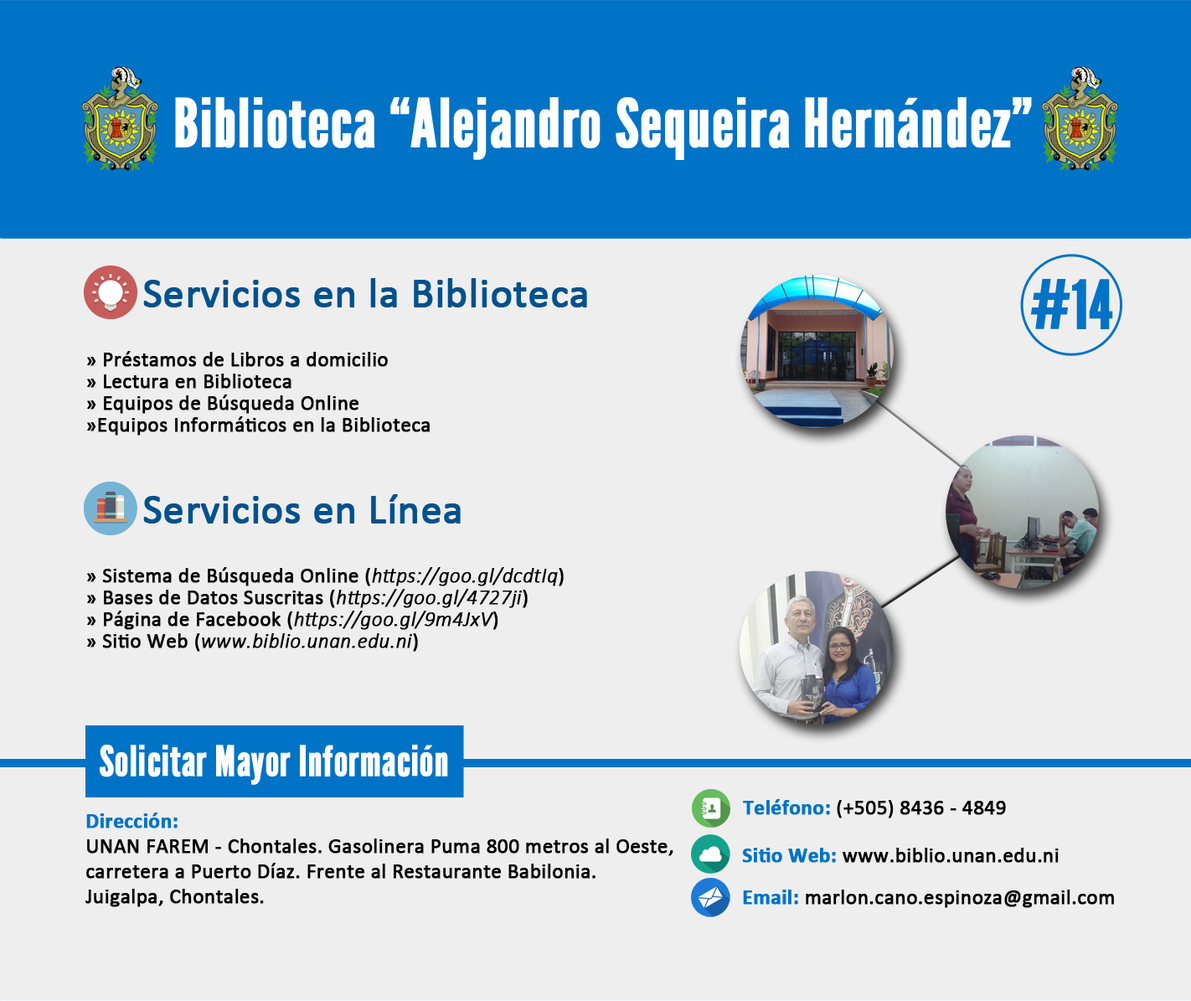
<style>
.page{position:relative;width:1191px;height:1001px;background:#eeeeee}
.page>*{position:absolute;margin:0}
.t1{font:67px "LeagueGothic-Regular";color:#ffffff;font-weight:bold}
.t2{font:41.9px "Calibri";color:#00518d;font-weight:bold}
.t3{font:67px "LeagueGothic-Regular";color:#0173c7;font-weight:bold}
.t4{font:20.9px "Calibri";color:#000000;font-weight:bold}
.t5{font:20.9px "Calibri-LightItalic";color:#000000;font-weight:bold}
.t6{font:41.9px "LeagueGothic-Regular";color:#ffffff;font-weight:bold}
.t7{font:20.9px "Calibri-Bold";color:#0173c7;font-weight:bold}
</style>
<div class="page">
<p class="t1" style="left:175px;top:97px;width:857px;height:63px">Biblioteca “Alejandro Sequeira Hernández”</p>
<p class="t2" style="left:143px;top:278px;width:444px;height:29px">Servicios en la Biblioteca</p>
<p class="t3" style="left:1031px;top:279px;width:82px;height:50px">#14</p>
<p class="t4" style="left:87px;top:351px;width:301px;height:16px">» Préstamos de Libros a domicilio</p>
<p class="t4" style="left:87px;top:374px;width:205px;height:15px">» Lectura en Biblioteca</p>
<p class="t4" style="left:87px;top:395px;width:272px;height:19px">» Equipos de Búsqueda Online</p>
<p class="t4" style="left:87px;top:416px;width:343px;height:20px">»Equipos Informáticos en la Biblioteca</p>
<p class="t2" style="left:143px;top:494px;width:318px;height:30px">Servicios en Línea</p>
<p class="t4" style="left:87px;top:567px;width:477px;height:19px">» Sistema de Búsqueda Online (<span class="t5">https://goo.gl/dcdtIq</span>)</p>
<p class="t4" style="left:87px;top:589px;width:441px;height:19px">» Bases de Datos Suscritas (<span class="t5">https://goo.gl/4727ji</span>)</p>
<p class="t4" style="left:87px;top:611px;width:411px;height:19px">» Página de Facebook (<span class="t5">https://goo.gl/9m4JxV</span>)</p>
<p class="t5" style="left:87px;top:633px;width:331px;height:19px"><span class="t4">» Sitio Web (</span>www.biblio.unan.edu.ni<span class="t4">)</span></p>
<p class="t6" style="left:100px;top:745px;width:348px;height:40px">Solicitar Mayor Información</p>
<p class="t4" style="left:743px;top:799px;width:263px;height:19px"><span class="t7">Teléfono: </span>(+505) 8436 - 4849</p>
<p class="t4" style="left:85px;top:813px;width:589px;height:94px"><span class="t7">Dirección:<br></span>UNAN FAREM - Chontales. Gasolinera Puma 800 metros al Oeste, carretera a Puerto Díaz. Frente al Restaurante Babilonia.<br>Juigalpa, Chontales.</p>
<p class="t4" style="left:742px;top:848px;width:317px;height:15px"><span class="t7">Sitio Web: </span>www.biblio.unan.edu.ni</p>
<p class="t4" style="left:743px;top:890px;width:371px;height:18px"><span class="t7">Email: </span>marlon.cano.espinoza@gmail.com</p>
</div>
